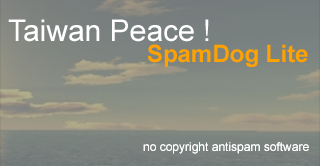
<style>
.page{position:relative;width:320px;height:166px}
.page>*{position:absolute;margin:0}
.t1{font:30px "ArialMT";color:#ffffff}
.t2{font:24px "Arial-BoldMT";color:#fea203}
.t3{font:12px "ArialMT";color:#ffffff}
</style>
<div class="page">
<p class="t1" style="left:8px;top:19px;width:201px;height:23px">Taiwan Peace !</p>
<p class="t2" style="left:147px;top:44px;width:161px;height:23px">SpamDog Lite</p>
<p class="t3" style="left:143px;top:142px;width:166px;height:12px">no copyright antispam software</p>
</div>
